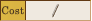
<style>
.page{position:relative;width:92px;height:21px;background:#efe9e0}
.page>*{position:absolute;margin:0}
.t1{font:10.7px "CenturySchoolbook";letter-spacing:0.025em;color:#4b3620}
</style>
<div class="page">
<p class="t1" style="left:1px;top:6px;width:23px;height:9px">Cost</p>
</div>
